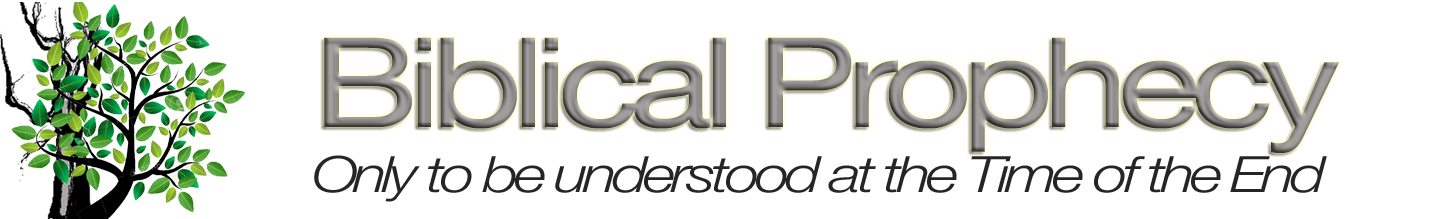
<style>
.page{position:relative;width:1432px;height:219px;background:#ffffff}
.page>*{position:absolute;margin:0}
.t1{font:125px "HelveticaNeue";letter-spacing:-0.075em;scale:1.25 1}
.t2{font:50px "HelveticaNeue-LightItalic";letter-spacing:-0.075em;color:#252525;scale:1.25 1}
</style>
<div class="page">
<p class="t1" style="left:324px;top:37px;width:1015px;height:116px">Biblical Prophecy</p>
<p class="t2" style="left:314px;top:155px;width:1013px;height:47px">Only to be understood at the Time of the End</p>
</div>
